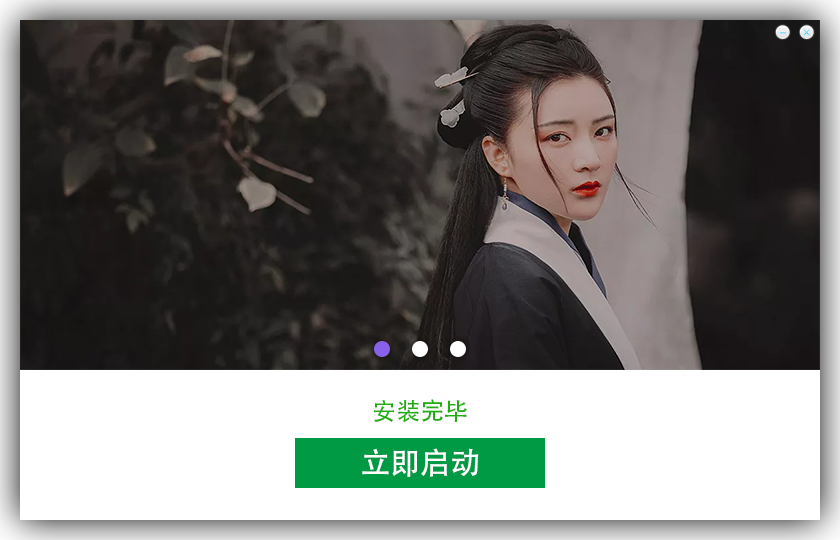
<style>
.page{position:relative;width:840px;height:540px;background:#ffffff}
.page>*{position:absolute;margin:0}
.t1{font:24px "AdobeHeitiStd-Regular";color:#20ad11}
.t2{font:30px "AdobeHeitiStd-Regular";color:#ffffff}
</style>
<div class="page">
<p class="t1" style="left:374px;top:399px;width:93px;height:24px">安装完毕</p>
<p class="t2" style="left:362px;top:448px;width:117px;height:29px">立即启动</p>
</div>
